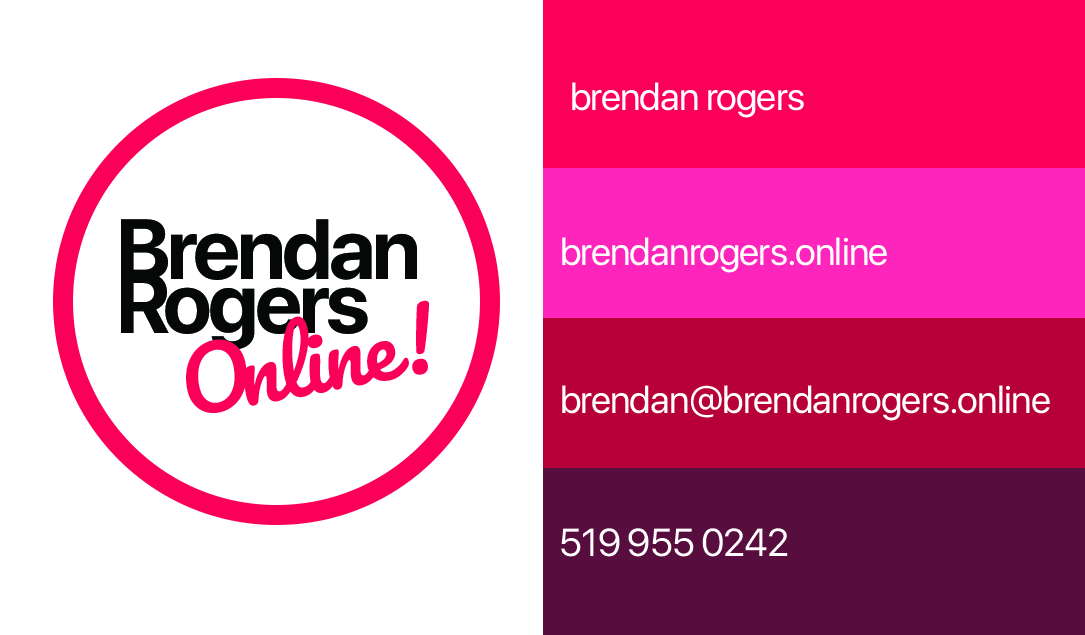
<style>
.page{position:relative;width:1085px;height:635px;background:#ffffff}
.page>*{position:absolute;margin:0}
.t1{font:38.9px "SFProDisplay-Regular";letter-spacing:-0.02em;color:#ffffff}
.t2{font:84.6px/54.2px "SFProDisplay-Bold";letter-spacing:-0.04em;color:#060808}
.t3{font:84.6px/54.2px "SFProDisplay-Bold";letter-spacing:-0.08em;color:#060808}
.t4{font:84.6px "Pacifico-Regular";letter-spacing:-0.02em;color:#fa0058}
.t5{font:84.6px "Pacifico-Regular";letter-spacing:-0.12em;color:#fa0058}
</style>
<div class="page">
<p class="t1" style="left:572px;top:82px;width:232px;height:36px">brendan rogers</p>
<p class="t2" style="left:121px;top:219px;width:296px;height:131px">Brendan<br><span class="t3">R</span>ogers</p>
<p class="t1" style="left:562px;top:237px;width:325px;height:36px">brendanrogers.online</p>
<p class="t4" style="left:186px;top:300px;width:244px;height:113px;rotate:-11deg"><span class="t5">O</span>nline!</p>
<p class="t1" style="left:562px;top:385px;width:488px;height:36px">brendan@brendanrogers.online</p>
<p class="t1" style="left:561px;top:528px;width:227px;height:29px">519 955 0242</p>
</div>
